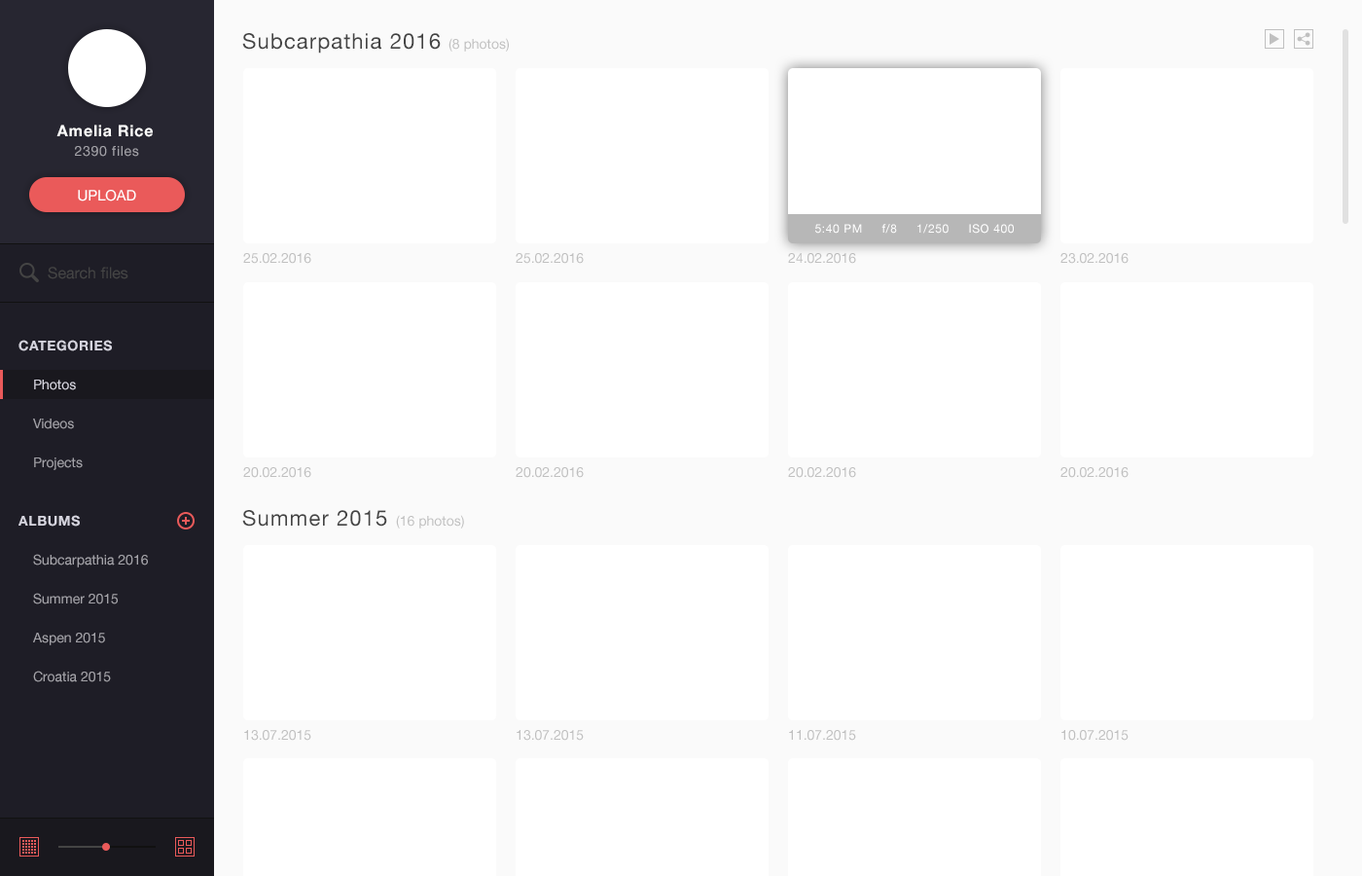
<style>
.page{position:relative;width:1362px;height:876px;background:#ffffff}
.page>*{position:absolute;margin:0}
.t1{font:21.4px "HelveticaNeue";letter-spacing:0.05em;color:#444444}
.t2{font:13.6px "HelveticaNeue";color:#c0c0c0}
.t3{font:15.6px "HelveticaNeue-Bold";letter-spacing:0.05em;color:#ffffff}
.t4{font:13.6px "HelveticaNeue";letter-spacing:0.05em;color:#a3a2a8}
.t5{font:14.6px "HelveticaNeue";color:#ffffff}
.t6{font:11.7px "HelveticaNeue";letter-spacing:0.05em;color:#ffffff}
.t7{font:15.6px "HelveticaNeue";color:#444444}
.t8{font:13.6px "HelveticaNeue-Bold";letter-spacing:0.05em;color:#d6d5df;text-transform:uppercase}
.t9{font:13.6px/38.9px "HelveticaNeue";color:#a3a2a8}
.t10{font:13.6px/38.9px "HelveticaNeue";color:#d6d5df}
</style>
<div class="page">
<p class="t1" style="left:242px;top:33px;width:199px;height:21px">Subcarpathia 2016</p>
<p class="t2" style="left:448px;top:38px;width:61px;height:14px">(8 photos)</p>
<p class="t3" style="left:56px;top:125px;width:97px;height:12px">Amelia Rice</p>
<p class="t4" style="left:75px;top:146px;width:64px;height:11px">2390 files</p>
<p class="t5" style="left:78px;top:190px;width:58px;height:11px">UPLOAD</p>
<p class="t6" style="left:815px;top:224px;width:199px;height:9px">5:40 PM     f/8     1/250     ISO 400</p>
<p class="t2" style="left:243px;top:253px;width:68px;height:11px">25.02.2016</p>
<p class="t2" style="left:516px;top:253px;width:68px;height:11px">25.02.2016</p>
<p class="t2" style="left:788px;top:253px;width:68px;height:11px">24.02.2016</p>
<p class="t2" style="left:1060px;top:253px;width:68px;height:11px">23.02.2016</p>
<p class="t7" style="left:48px;top:267px;width:80px;height:12px">Search files</p>
<p class="t8" style="left:18px;top:340px;width:94px;height:11px">Categories</p>
<p class="t9" style="left:33px;top:379px;width:50px;height:91px"><span class="t10">Photos<br></span>Videos<br>Projects</p>
<p class="t2" style="left:243px;top:467px;width:68px;height:11px">20.02.2016</p>
<p class="t2" style="left:516px;top:467px;width:68px;height:11px">20.02.2016</p>
<p class="t2" style="left:788px;top:467px;width:68px;height:11px">20.02.2016</p>
<p class="t2" style="left:1060px;top:467px;width:68px;height:11px">20.02.2016</p>
<p class="t1" style="left:242px;top:510px;width:145px;height:16px">Summer 2015</p>
<p class="t8" style="left:18px;top:515px;width:62px;height:11px">albums</p>
<p class="t2" style="left:396px;top:515px;width:68px;height:13px">(16 photos)</p>
<p class="t9" style="left:33px;top:554px;width:115px;height:128px">Subcarpathia 2016<br>Summer 2015<br>Aspen 2015<br>Croatia 2015</p>
<p class="t2" style="left:244px;top:730px;width:67px;height:10px">13.07.2015</p>
<p class="t2" style="left:517px;top:730px;width:67px;height:10px">13.07.2015</p>
<p class="t2" style="left:789px;top:730px;width:67px;height:10px">11.07.2015</p>
<p class="t2" style="left:1061px;top:730px;width:67px;height:10px">10.07.2015</p>
</div>
